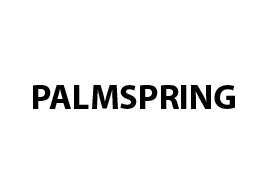
<style>
.page{position:relative;width:269px;height:193px;background:#ffffff}
.page>*{position:absolute;margin:0}
.t1{font:35px "MyriadPro-Bold";color:#000000}
</style>
<div class="page">
<p class="t1" style="left:33px;top:85px;width:202px;height:24px">PALMSPRING</p>
</div>
